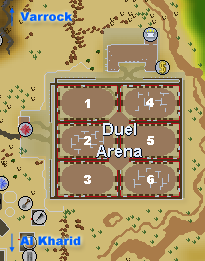
<style>
.page{position:relative;width:205px;height:261px;background:#cfba74}
.page>*{position:absolute;margin:0}
.t1{font:12px "Arial-Black";color:#0060ff}
.t2{font:12px "Arial-Black";color:#ffffff}
</style>
<div class="page">
<p class="t1" style="left:20px;top:12px;width:53px;height:9px">Varrock</p>
<p class="t2" style="left:85px;top:99px;width:5px;height:9px">1</p>
<p class="t2" style="left:146px;top:98px;width:8px;height:9px">4</p>
<p class="t2" style="left:84px;top:136px;width:7px;height:9px">2</p>
<p class="t2" style="left:147px;top:136px;width:7px;height:9px">5</p>
<p class="t2" style="left:84px;top:175px;width:7px;height:9px">3</p>
<p class="t2" style="left:147px;top:175px;width:7px;height:9px">6</p>
<p class="t1" style="left:20px;top:236px;width:61px;height:10px">Al Kharid</p>
</div>
